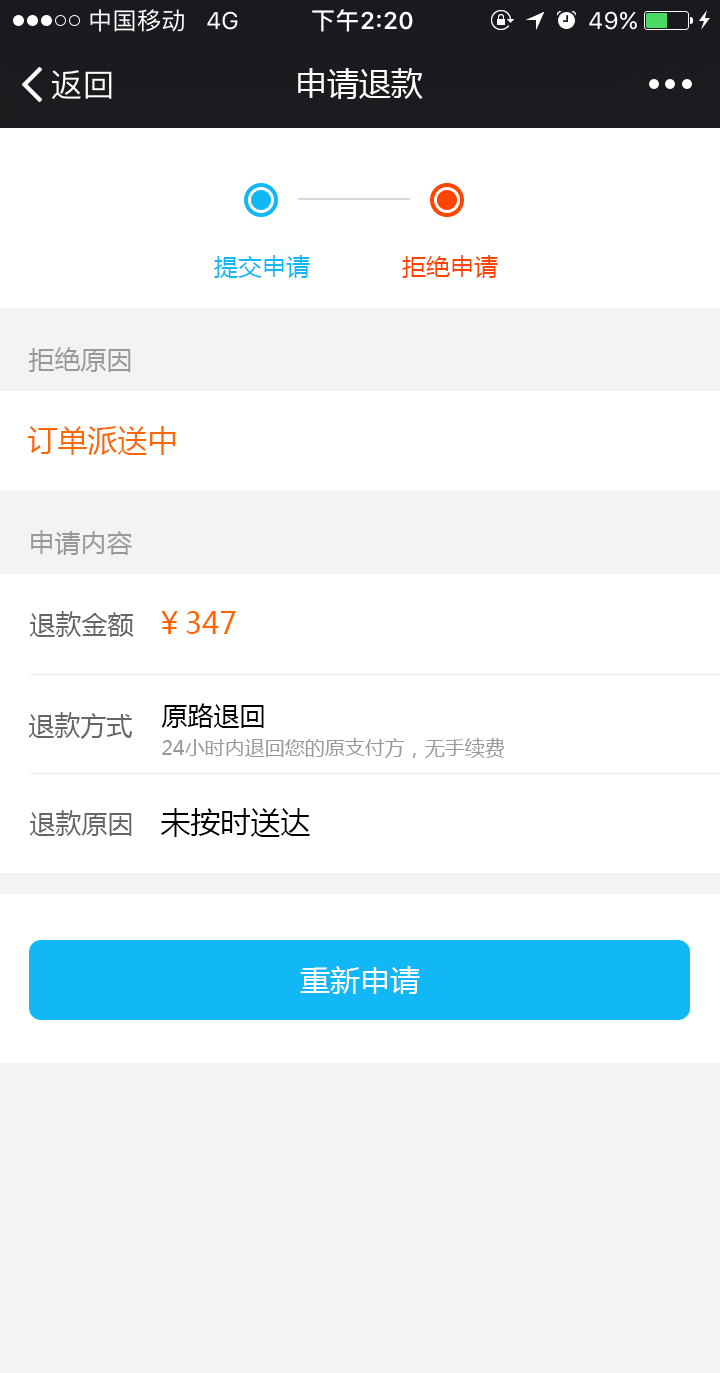
<style>
.page{position:relative;width:720px;height:1373px;background:#ffffff}
.page>*{position:absolute;margin:0}
.t1{font:32px "MicrosoftYaHei";color:#ffffff}
.t2{font:24px "MicrosoftYaHei";color:#12b7f5}
.t3{font:24px "MicrosoftYaHei";color:#ff4400}
.t4{font:26px "MicrosoftYaHei";color:#999999}
.t5{font:30px "MicrosoftYaHei";color:#ff6600}
.t6{font:26px "MicrosoftYaHei";color:#666666}
.t7{font:26px "MicrosoftYaHei";color:#000000}
.t8{font:20px "MicrosoftYaHei";color:#999999}
.t9{font:30px "MicrosoftYaHei";color:#000000}
.t10{font:30px "MicrosoftYaHei";color:#fefefe}
</style>
<div class="page">
<p class="t1" style="left:298px;top:68px;width:125px;height:31px">申请退款</p>
<p class="t2" style="left:214px;top:255px;width:96px;height:23px">提交申请</p>
<p class="t3" style="left:402px;top:255px;width:96px;height:23px">拒绝申请</p>
<p class="t4" style="left:28px;top:347px;width:103px;height:25px">拒绝原因</p>
<p class="t5" style="left:28px;top:426px;width:148px;height:29px">订单派送中</p>
<p class="t4" style="left:31px;top:530px;width:102px;height:25px">申请内容</p>
<p class="t6" style="left:30px;top:611px;width:104px;height:26px">退款金额</p>
<p class="t5" style="left:161px;top:611px;width:75px;height:23px">￥347</p>
<p class="t6" style="left:29px;top:712px;width:104px;height:27px">退款方式</p>
<p class="t7" style="left:161px;top:703px;width:103px;height:25px">原路退回</p>
<p class="t8" style="left:162px;top:738px;width:342px;height:20px">24小时内退回您的原支付方，无手续费</p>
<p class="t9" style="left:160px;top:808px;width:150px;height:29px">未按时送达</p>
<p class="t6" style="left:30px;top:810px;width:102px;height:26px">退款原因</p>
<p class="t10" style="left:300px;top:966px;width:120px;height:28px">重新申请</p>
</div>
